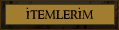
<style>
.page{position:relative;width:119px;height:30px;background:#a07d2f}
.page>*{position:absolute;margin:0}
.t1{font:14px "RingbearerMedium";letter-spacing:0.005em;color:#000000}
.t2{font:14px "ArialMT";letter-spacing:0.005em;color:#000000}
</style>
<div class="page">
<p class="t1" style="left:26px;top:10px;width:68px;height:9px">itemlerim</p>
<p class="t2" style="left:26px;top:7px;width:2px;height:2px">.</p>
<p class="t2" style="left:78px;top:7px;width:2px;height:2px">.</p>
</div>
